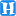
<style>
.page{position:relative;width:16px;height:16px;background:#1585e6}
.page>*{position:absolute;margin:0}
.t1{font:15px "Ravie";color:#ffffff}
</style>
<div class="page">
<p class="t1" style="left:1px;top:2px;width:14px;height:13px">H</p>
</div>
